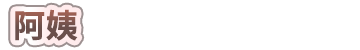
<style>
.page{position:relative;width:360px;height:50px;background:#ffffff}
.page>*{position:absolute;margin:0}
.t1{font:32px "SourceHanSansSC-Bold";color:#73534d;font-weight:bold}
</style>
<div class="page">
<p class="t1" style="left:15px;top:9px;width:63px;height:32px">阿姨</p>
</div>
